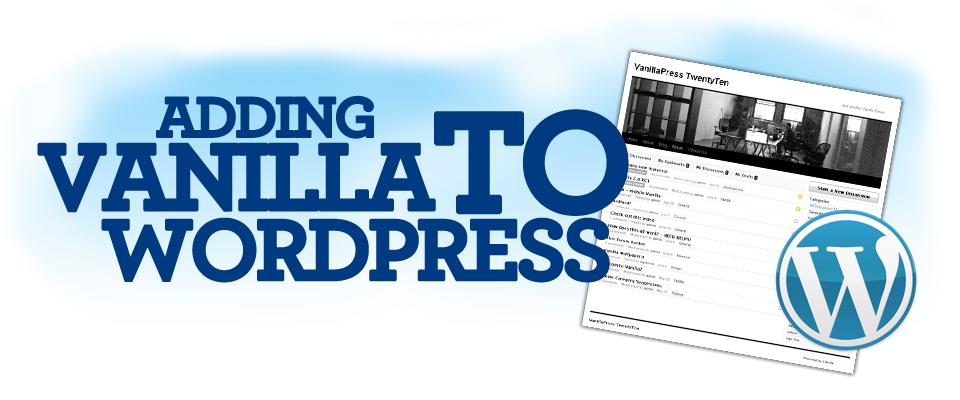
<style>
.page{position:relative;width:960px;height:400px;background:#ffffff}
.page>*{position:absolute;margin:0}
.t1{font:60px "Archer-Bold";letter-spacing:-0.075em;color:#003b82;text-transform:uppercase;font-weight:bold}
.t2{font:150px "Archer-Bold";letter-spacing:-0.075em;color:#003b82;text-transform:uppercase;font-weight:bold}
.t3{font:100px "Archer-Bold";letter-spacing:-0.075em;color:#003b82;text-transform:uppercase;font-weight:bold}
.t4{font:91px "Archer-Bold";letter-spacing:-0.075em;color:#003b82;text-transform:uppercase;font-weight:bold}
</style>
<div class="page">
<p class="t1" style="left:156px;top:95px;width:218px;height:44px">Adding</p>
<p class="t2" style="left:434px;top:109px;width:195px;height:107px">to</p>
<p class="t3" style="left:37px;top:142px;width:399px;height:71px">vanilla</p>
<p class="t4" style="left:101px;top:217px;width:509px;height:66px">wordpress</p>
</div>
